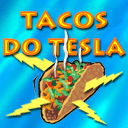
<style>
.page{position:relative;width:128px;height:128px}
.page>*{position:absolute;margin:0}
.t1{font:23.7px "Lithos-Black";text-transform:uppercase;font-weight:bold}
.t2{font:23.7px "Lithos-Black";text-transform:uppercase;font-weight:bold;scale:0.96 1}
.t3{font:26.7px "Lithos-Black";text-transform:uppercase;font-weight:bold}
</style>
<div class="page">
<p class="t1" style="left:20px;top:10px;width:87px;height:19px">TACOS</p>
<p class="t2" style="left:3px;top:37px;width:123px;height:19px"><span class="t3"><br></span>DO TESLA</p>
</div>
